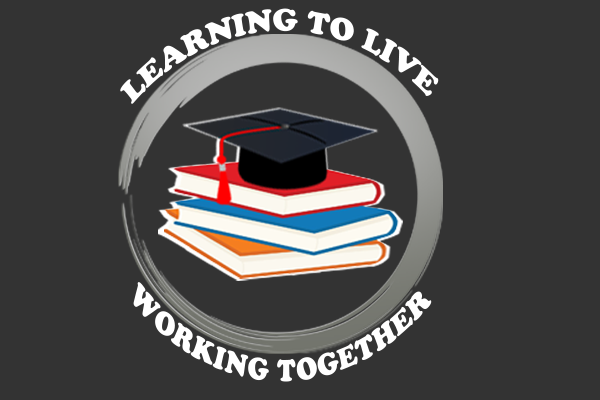
<style>
.page{position:relative;width:600px;height:400px;background:#333333}
.page>*{position:absolute;margin:0}
.t1{font:29.8px "CooperBlackStd";color:#ffffff;scale:0.84 1}
.t2{font:29.8px "CooperBlackStd";color:#ffffff;scale:0.75 1}
</style>
<div class="page">
<p class="t1" style="left:120px;top:8px;width:319px;height:96px">LEARNING TO LIVE</p>
<p class="t2" style="left:133px;top:282px;width:299px;height:100px">WORKING TOGETHER</p>
</div>
